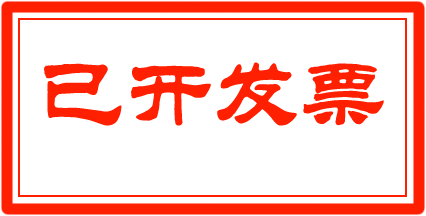
<style>
.page{position:relative;width:426px;height:216px;background:#ffffff}
.page>*{position:absolute;margin:0}
.t1{font:90px "HYf3gj";letter-spacing:-0.06em;color:#ff1f01;font-weight:bold}
</style>
<div class="page">
<p class="t1" style="left:44px;top:62px;width:340px;height:64px">已开发票</p>
</div>
